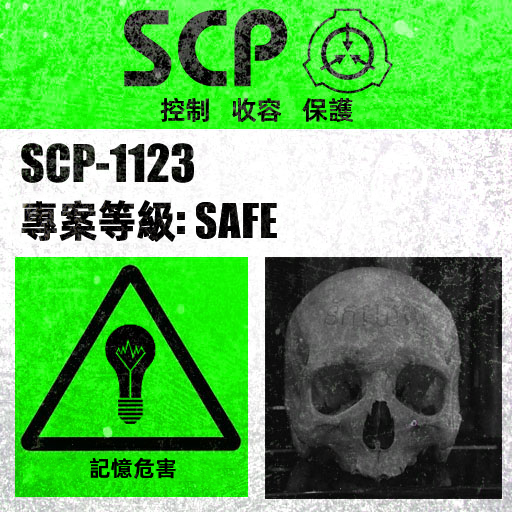
<style>
.page{position:relative;width:512px;height:512px}
.page>*{position:absolute;margin:0}
.t1{font:26px "AlibabaPuHuiTiM"}
.t2{font:44px "AlibabaPuHuiTiB";letter-spacing:-0.02em;color:#000000;font-weight:bold;scale:0.9 1}
.t3{font:62px "URWImpactW01-Bold";color:#000000}
.t4{font:52px "URWImpactW01-Bold";letter-spacing:0.02em;color:#000000}
.t5{font:22px "AlibabaPuHuiTiM";letter-spacing:0.02em;color:#000000}
</style>
<div class="page">
<p class="t1" style="left:160px;top:97px;width:193px;height:26px">控制   收容   保護</p>
<p class="t2" style="left:21px;top:200px;width:256px;height:42px">專案等級<span class="t3">: </span><span class="t4">SAFE</span></p>
<p class="t5" style="left:90px;top:457px;width:86px;height:22px">記憶危害</p>
</div>
